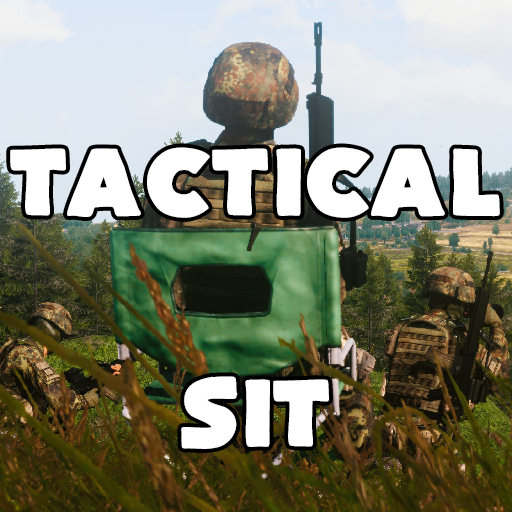
<style>
.page{position:relative;width:512px;height:512px}
.page>*{position:absolute;margin:0}
.t1{font:93px "FlatBread";color:#ffffff}
</style>
<div class="page">
<p class="t1" style="left:10px;top:147px;width:490px;height:71px">Tactical</p>
<p class="t1" style="left:181px;top:376px;width:148px;height:73px">SIT</p>
</div>
